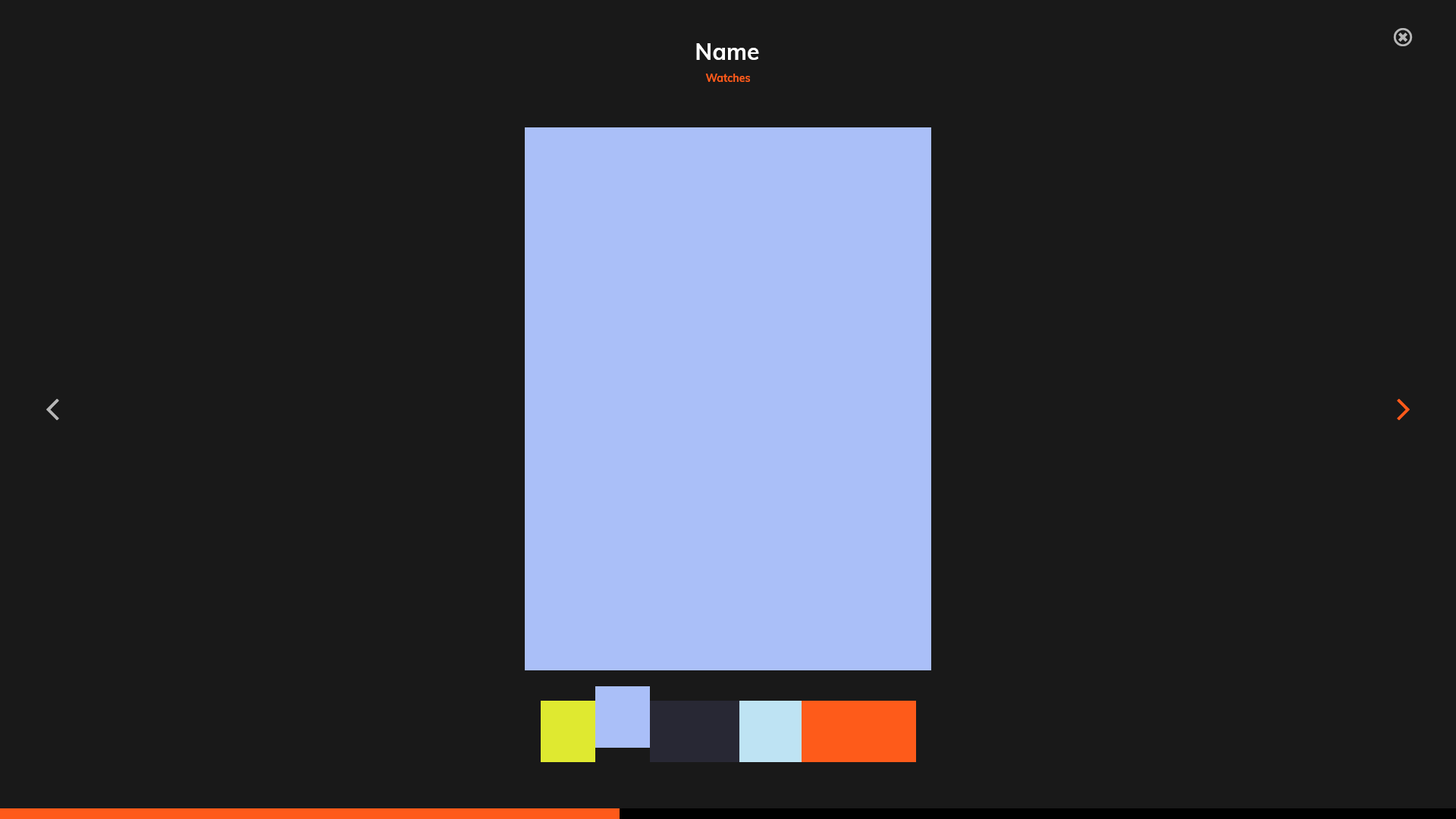
<style>
.page{position:relative;width:1456px;height:819px;background:#191919}
.page>*{position:absolute;margin:0}
.t1{font:22.7px "Muli-Bold";color:#ffffff}
.t2{font:10.6px "Muli-Bold";color:#fe5a1a}
</style>
<div class="page">
<p class="t1" style="left:696px;top:43px;width:63px;height:17px">Name</p>
<p class="t2" style="left:705px;top:74px;width:45px;height:8px">Watches</p>
</div>
